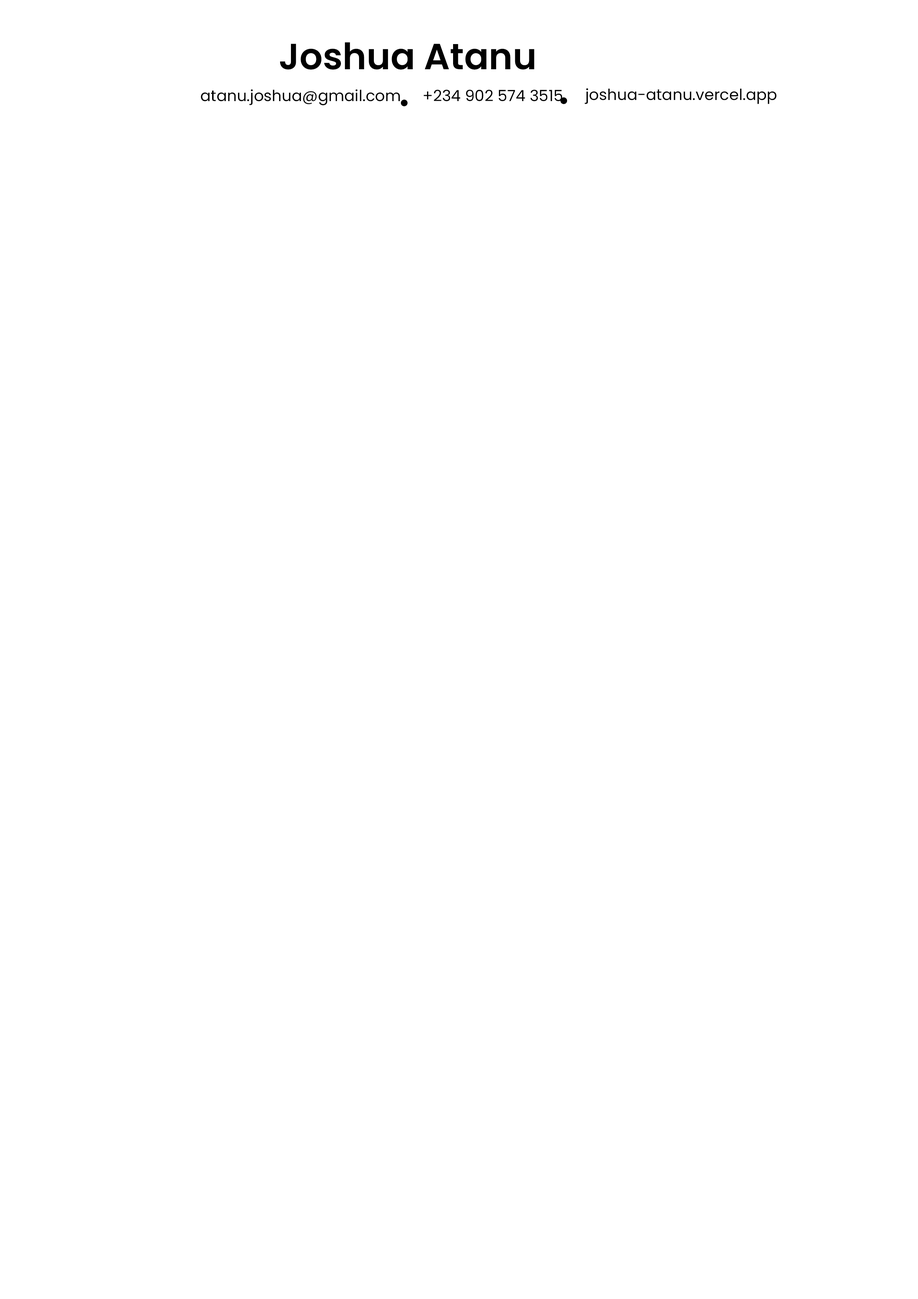
<style>
.page{position:relative;width:918px;height:1299px;background:#ffffff}
.page>*{position:absolute;margin:0}
.t1{font:36.4px "Poppins-SemiBold";color:#000000}
.t2{font:15.4px "Poppins-Regular";color:#000000}
</style>
<div class="page">
<p class="t1" style="left:280px;top:42px;width:255px;height:28px">Joshua Atanu</p>
<p class="t2" style="left:201px;top:89px;width:199px;height:17px">atanu.joshua@gmail.com</p>
<p class="t2" style="left:424px;top:90px;width:138px;height:11px">+234 902 574 3515</p>
<p class="t2" style="left:585px;top:88px;width:192px;height:16px">joshua-atanu.vercel.app</p>
</div>
